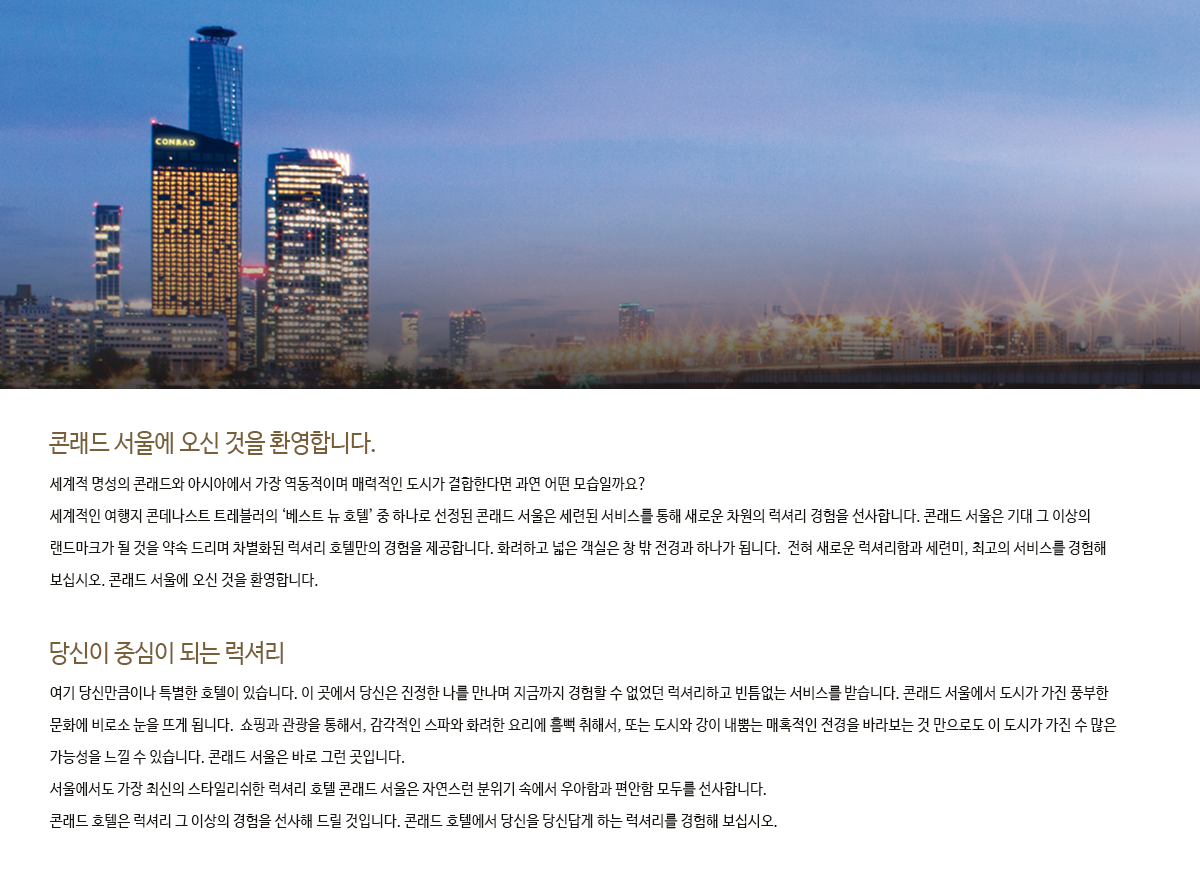
<style>
.page{position:relative;width:1200px;height:884px;background:#ffffff}
.page>*{position:absolute;margin:0}
.t1{font:25px "NanumBarunGothic";color:#785f37;scale:0.9 1}
.t2{font:16px/32px "NanumBarunGothic";color:#181510;scale:0.9 1}
</style>
<div class="page">
<p class="t1" style="left:49px;top:431px;width:326px;height:24px">콘래드 서울에 오신 것을 환영합니다.</p>
<p class="t2" style="left:49px;top:476px;width:1057px;height:112px">세계적 명성의 콘래드와 아시아에서 가장 역동적이며 매력적인 도시가 결합한다면 과연 어떤 모습일까요?<br>세계적인 여행지 콘데나스트 트레블러의 ‘베스트 뉴 호텔’ 중 하나로 선정된 콘래드 서울은 세련된 서비스를 통해 새로운 차원의 럭셔리 경험을 선사합니다. 콘래드 서울은 기대 그 이상의 랜드마크가 될 것을 약속 드리며 차별화된 럭셔리 호텔만의 경험을 제공합니다. 화려하고 넓은 객실은 창 밖 전경과 하나가 됩니다.  전혀 새로운 럭셔리함과 세련미, 최고의 서비스를 경험해 보십시오. 콘래드 서울에 오신 것을 환영합니다.</p>
<p class="t1" style="left:50px;top:641px;width:233px;height:24px">당신이 중심이 되는 럭셔리</p>
<p class="t2" style="left:49px;top:685px;width:1068px;height:144px">여기 당신만큼이나 특별한 호텔이 있습니다. 이 곳에서 당신은 진정한 나를 만나며 지금까지 경험할 수 없었던 럭셔리하고 빈틈없는 서비스를 받습니다. 콘래드 서울에서 도시가 가진 풍부한 문화에 비로소 눈을 뜨게 됩니다.  쇼핑과 관광을 통해서, 감각적인 스파와 화려한 요리에 흠뻑 취해서, 또는 도시와 강이 내뿜는 매혹적인 전경을 바라보는 것 만으로도 이 도시가 가진 수 많은 가능성을 느낄 수 있습니다. 콘래드 서울은 바로 그런 곳입니다. <br>서울에서도 가장 최신의 스타일리쉬한 럭셔리 호텔 콘래드 서울은 자연스런 분위기 속에서 우아함과 편안함 모두를 선사합니다. <br>콘래드 호텔은 럭셔리 그 이상의 경험을 선사해 드릴 것입니다. 콘래드 호텔에서 당신을 당신답게 하는 럭셔리를 경험해 보십시오.</p>
</div>
